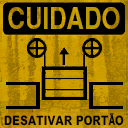
<style>
.page{position:relative;width:128px;height:128px;background:#000000}
.page>*{position:absolute;margin:0}
.t1{font:29.4px "Helvetica-Narrow-Bold";color:#bd9a00}
.t2{font:12.9px "MHeiPRC-Xbold";letter-spacing:0.02em;color:#000000;scale:0.84 1}
.t3{font:12.9px "Helvetica-Narrow-Bold";letter-spacing:0.02em;color:#000000;scale:0.84 1}
</style>
<div class="page">
<p class="t1" style="left:8px;top:7px;width:112px;height:22px">CUIDADO</p>
<p class="t2" style="left:4px;top:113px;width:120px;height:13px">DESATIVAR PORT<span class="t3">Ã</span>O</p>
</div>
